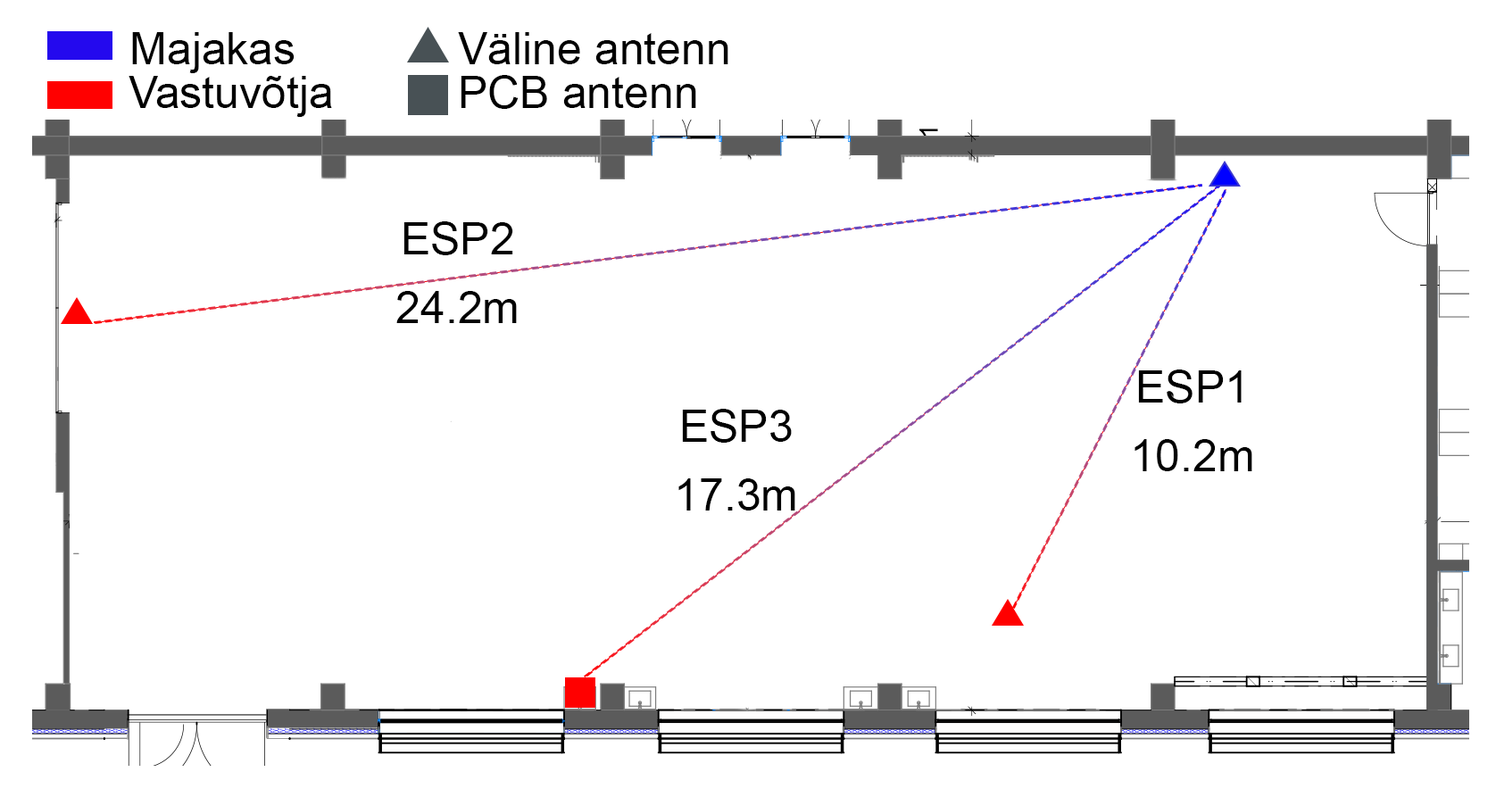
<style>
.page{position:relative;width:1496px;height:797px;background:#ffffff}
.page>*{position:absolute;margin:0}
.t1{font:44.6px "ArialMT";color:#000000}
</style>
<div class="page">
<p class="t1" style="left:132px;top:32px;width:163px;height:41px">Majakas</p>
<p class="t1" style="left:458px;top:32px;width:270px;height:32px">Väline antenn</p>
<p class="t1" style="left:129px;top:76px;width:203px;height:41px">Vastuvõtja</p>
<p class="t1" style="left:461px;top:75px;width:235px;height:34px">PCB antenn</p>
<p class="t1" style="left:403px;top:221px;width:110px;height:34px">ESP2</p>
<p class="t1" style="left:396px;top:291px;width:121px;height:32px">24.2m</p>
<p class="t1" style="left:1138px;top:370px;width:104px;height:33px">ESP1</p>
<p class="t1" style="left:682px;top:409px;width:110px;height:34px">ESP3</p>
<p class="t1" style="left:1134px;top:439px;width:118px;height:32px">10.2m</p>
<p class="t1" style="left:678px;top:478px;width:117px;height:33px">17.3m</p>
</div>
